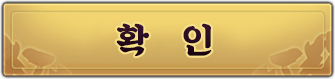
<style>
.page{position:relative;width:335px;height:79px}
.page>*{position:absolute;margin:0}
.t1{font:35.8px "SDKukdetopokki-bBd";letter-spacing:0.12em;color:#290c20}
</style>
<div class="page">
<p class="t1" style="left:116px;top:23px;width:96px;height:34px">확  인</p>
</div>
